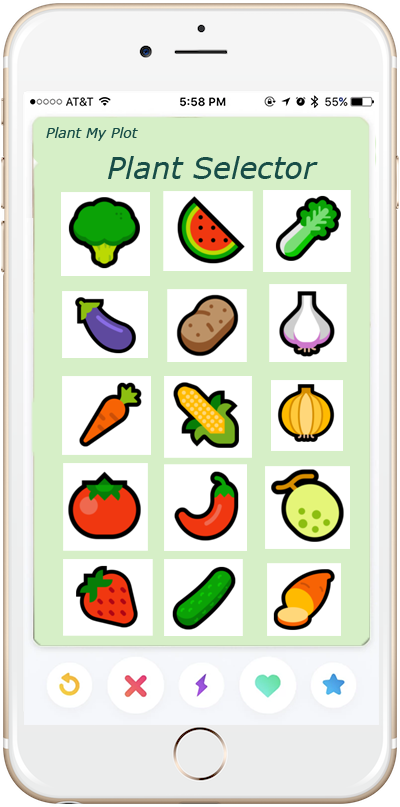
<style>
.page{position:relative;width:400px;height:807px;background:#d6efc7}
.page>*{position:absolute;margin:0}
.t1{font:14px "Verdana-Italic";color:#184d47}
.t2{font:30px "Verdana-Italic";color:#184d47}
</style>
<div class="page">
<p class="t1" style="left:46px;top:127px;width:92px;height:14px">Plant My Plot</p>
<p class="t2" style="left:108px;top:156px;width:210px;height:23px">Plant Selector</p>
</div>
